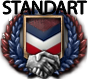
<style>
.page{position:relative;width:89px;height:79px}
.page>*{position:absolute;margin:0}
.t1{font:18.7px "MyriadPro-Regular";color:#000000}
</style>
<div class="page">
<p class="t1" style="left:3px;top:1px;width:84px;height:13px">STANDART</p>
</div>
